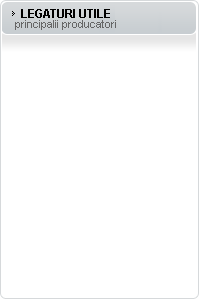
<style>
.page{position:relative;width:199px;height:299px;background:#ffffff}
.page>*{position:absolute;margin:0}
.t1{font:11px/10px "ArialMT";color:#666666}
.t2{font:12px/10px "Arial-BoldMT";color:#ffffff;text-transform:uppercase}
.t3{font:12px/10px "Arial-BoldMT";color:#010000;text-transform:uppercase}
</style>
<div class="page">
<p class="t1" style="left:15px;top:9px;width:101px;height:21px"><span class="t2">  </span><span class="t3">Legaturi UtILE<br></span>principalii producatori</p>
</div>
